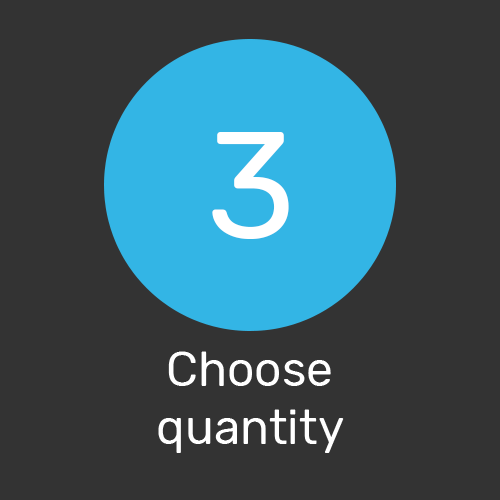
<style>
.page{position:relative;width:500px;height:500px;background:#333333}
.page>*{position:absolute;margin:0}
.t1{font:150px "Rubik-Regular";color:#ffffff}
.t2{font:48px "Rubik-Regular";color:#ffffff}
</style>
<div class="page">
<p class="t1" style="left:212px;top:132px;width:77px;height:107px">3</p>
<p class="t2" style="left:158px;top:351px;width:186px;height:102px;text-align:center">Choose <br>quantity</p>
</div>
